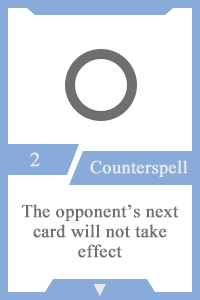
<style>
.page{position:relative;width:200px;height:300px;background:#ffffff}
.page>*{position:absolute;margin:0}
.t1{font:20px "TimesNewRomanPSMT";color:#e9e9e9;font-weight:bold}
.t2{font:18px "TimesNewRomanPSMT";color:#e9e9e9;font-weight:bold}
.t3{font:18px/20px "TimesNewRomanPSMT";color:#6f6f6f;font-weight:bold}
.t4{font:14px "AdobeHeitiStd-Regular";color:#e9e9e9;font-weight:bold}
</style>
<div class="page">
<p class="t1" style="left:30px;top:152px;width:10px;height:15px">2</p>
<p class="t2" style="left:90px;top:160px;width:98px;height:17px">Counterspell</p>
<p class="t3" style="left:22px;top:204px;width:157px;height:54px;text-align:center">The opponent’s next card will not take effect</p>
<p class="t4" style="left:93px;top:284px;width:13px;height:12px">▼</p>
</div>
